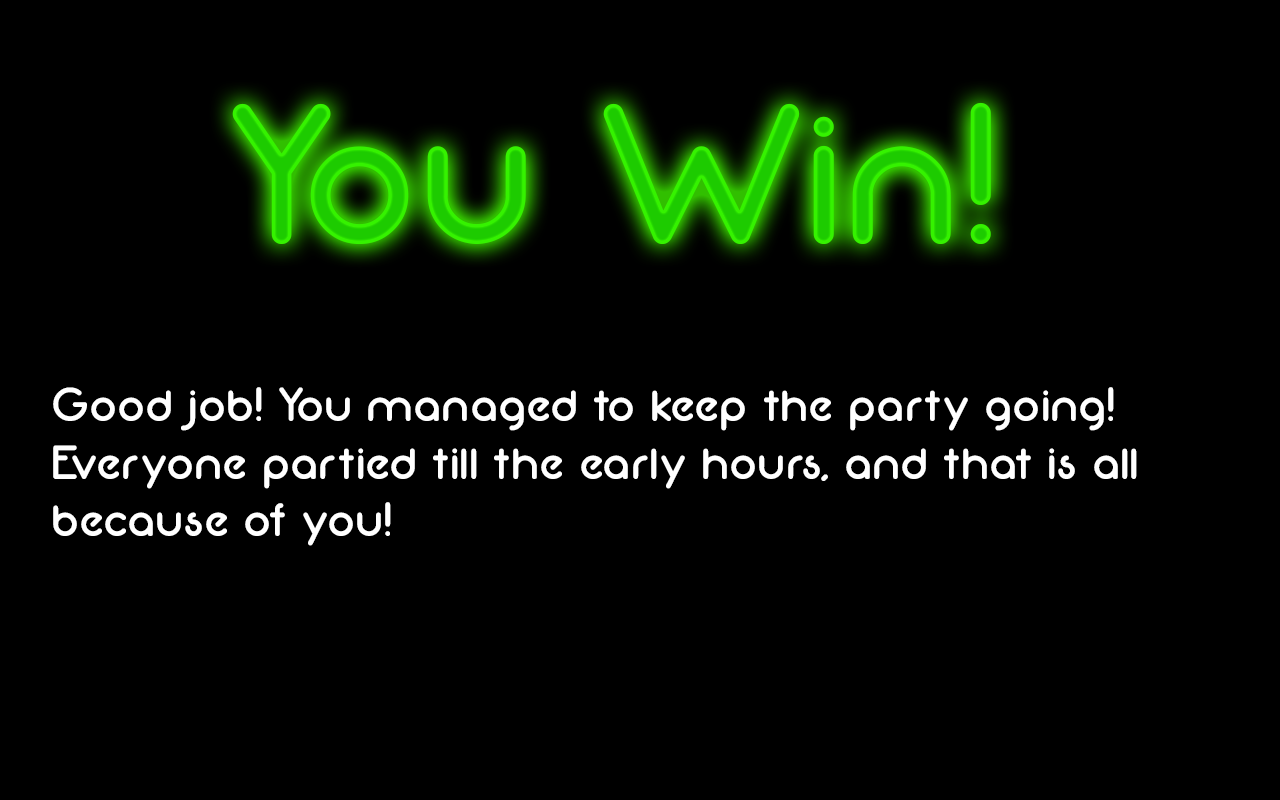
<style>
.page{position:relative;width:1280px;height:800px;background:#000000}
.page>*{position:absolute;margin:0}
.t1{font:200px "Neon80s";color:#1dcb00}
.t2{font:48px "Neon80s";color:#ffffff}
</style>
<div class="page">
<p class="t1" style="left:232px;top:102px;width:759px;height:142px">You Win!</p>
<p class="t2" style="left:53px;top:387px;width:1084px;height:159px">Good job! You managed to keep the party going! <br>Everyone partied till the early hours, and that is all <br>because of you!</p>
</div>
